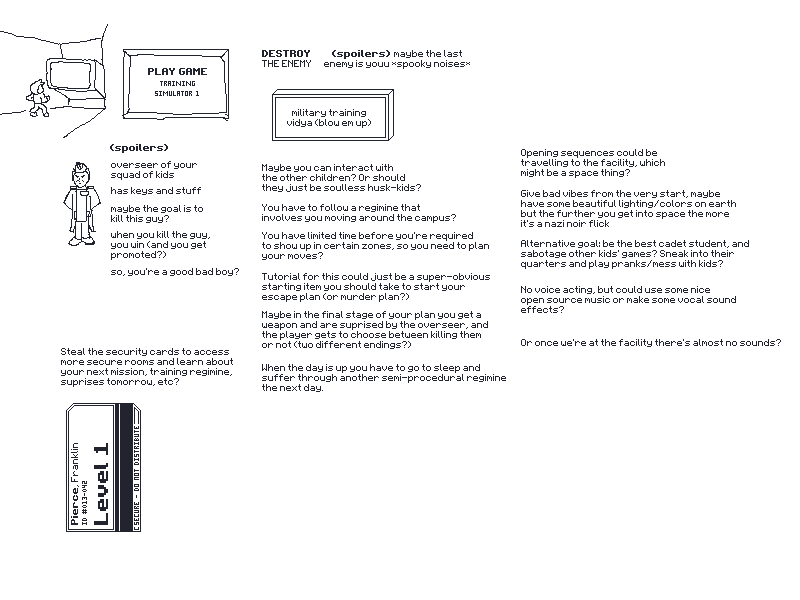
<style>
.page{position:relative;width:800px;height:600px;background:#ffffff}
.page>*{position:absolute;margin:0}
.t1{font:16px/10px "Varinius";color:#21242e}
.t2{font:16px/10px "Varinius-Bold";color:#21242e}
.t3{font:16px "Varinius-Bold";color:#21242e}
.t4{font:8px "Naxcraft";color:#21242e}
.t5{font:16px "Varinius";color:#21242e}
.t6{font:32px "Varinius-Bold";color:#21242e}
</style>
<div class="page">
<p class="t1" style="left:262px;top:50px;width:49px;height:17px;text-align:center"><span class="t2">DESTROY<br></span>THE ENEMY</p>
<p class="t1" style="left:324px;top:50px;width:146px;height:19px;text-align:center"><span class="t2">(spoilers) </span>maybe the last<br>enemy is youu *spooky noises*</p>
<p class="t3" style="left:148px;top:68px;width:59px;height:7px">PLAY GAME</p>
<p class="t4" style="left:155px;top:81px;width:44px;height:15px;text-align:center">tRAINING<br>SIMULATOR 1</p>
<p class="t1" style="left:287px;top:109px;width:84px;height:19px;text-align:center">military training<br>vidya (blow em up)</p>
<p class="t3" style="left:110px;top:144px;width:58px;height:9px">(spoilers)</p>
<p class="t1" style="left:521px;top:149px;width:144px;height:29px">Opening sequences could be <br>travelling to the facility, which <br>might be a space thing?</p>
<p class="t1" style="left:111px;top:161px;width:86px;height:19px">overseer of your<br>squad of kids</p>
<p class="t1" style="left:262px;top:164px;width:159px;height:28px">Maybe you can interact with<br>the other children? Or should<br>they just be soulless husk-kids?</p>
<p class="t5" style="left:111px;top:187px;width:90px;height:8px">has keys and stuff</p>
<p class="t1" style="left:521px;top:190px;width:215px;height:37px">Give bad vibes from the very start, maybe<br>have some beautiful lighting/colors on earth<br>but the further you get into space the more<br>it’s a nazi noir flick</p>
<p class="t1" style="left:111px;top:205px;width:92px;height:18px">maybe the goal is to<br>kill this guy?</p>
<p class="t1" style="left:262px;top:204px;width:194px;height:19px">You have to follow a regimine that<br>involves you moving around the campus?</p>
<p class="t1" style="left:111px;top:231px;width:99px;height:29px">when you kill the guy,<br>you win (and you get<br>promoted?)</p>
<p class="t1" style="left:262px;top:232px;width:227px;height:28px">You have limited time before you’re required<br>to show up in certain zones, so you need to plan<br>your moves?</p>
<p class="t1" style="left:521px;top:240px;width:228px;height:29px">Alternative goal: be the best cadet student, and<br>sabotage other kids’ games? Sneak into their<br>quarters and play pranks/mess with kids?</p>
<p class="t5" style="left:111px;top:268px;width:128px;height:8px">so, you’re a good bad boy?</p>
<p class="t1" style="left:262px;top:273px;width:228px;height:29px">Tutorial for this could just be a super-obvious<br>starting item you should take to start your <br>escape plan (or murder plan?)</p>
<p class="t1" style="left:521px;top:286px;width:215px;height:27px">No voice acting, but could use some nice<br>open source music or make some vocal sound<br>effects?</p>
<p class="t1" style="left:262px;top:311px;width:226px;height:38px">Maybe in the final stage of your plan you get a <br>weapon and are suprised by the overseer, and <br>the player gets to choose between killing them <br>or not (two different endings?)</p>
<p class="t5" style="left:521px;top:339px;width:260px;height:8px">Or once we’re at the facility there’s almost no sounds?</p>
<p class="t1" style="left:61px;top:348px;width:172px;height:39px">Steal the security cards to access<br>more secure rooms and learn about<br>your next mission, training regimine,<br>suprises tomorrow, etc?</p>
<p class="t1" style="left:262px;top:364px;width:244px;height:28px">When the day is up you have to go to sleep and<br>suffer through another semi-procedural regimine<br>the next day.</p>
<p class="t4" style="left:134px;top:426px;width:5px;height:99px;rotate:-90deg">SEcure - do not distribute</p>
<p class="t5" style="left:71px;top:443px;width:8px;height:82px;rotate:-90deg"><span class="t3">Pierce</span>, Franklin</p>
<p class="t6" style="left:94px;top:443px;width:14px;height:82px;rotate:-90deg">Level 1</p>
<p class="t4" style="left:82px;top:481px;width:5px;height:44px;rotate:-90deg">ID #013-042</p>
</div>
